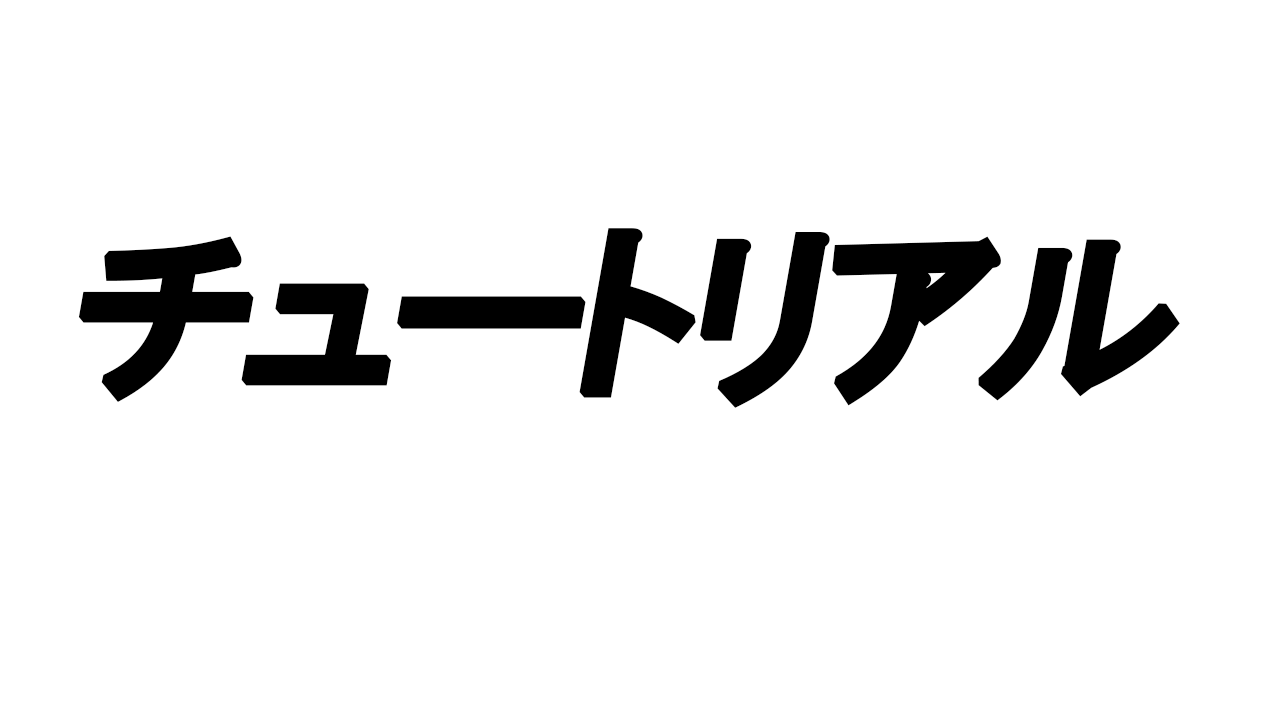
<style>
.page{position:relative;width:1280px;height:720px;background:#ffffff}
.page>*{position:absolute;margin:0}
.t1{font:194.2px "HGPGothicE";letter-spacing:-0.07em;color:#000000;font-weight:bold;font-style:italic}
</style>
<div class="page">
<p class="t1" style="left:78px;top:228px;width:1102px;height:180px">チュートリアル</p>
</div>
